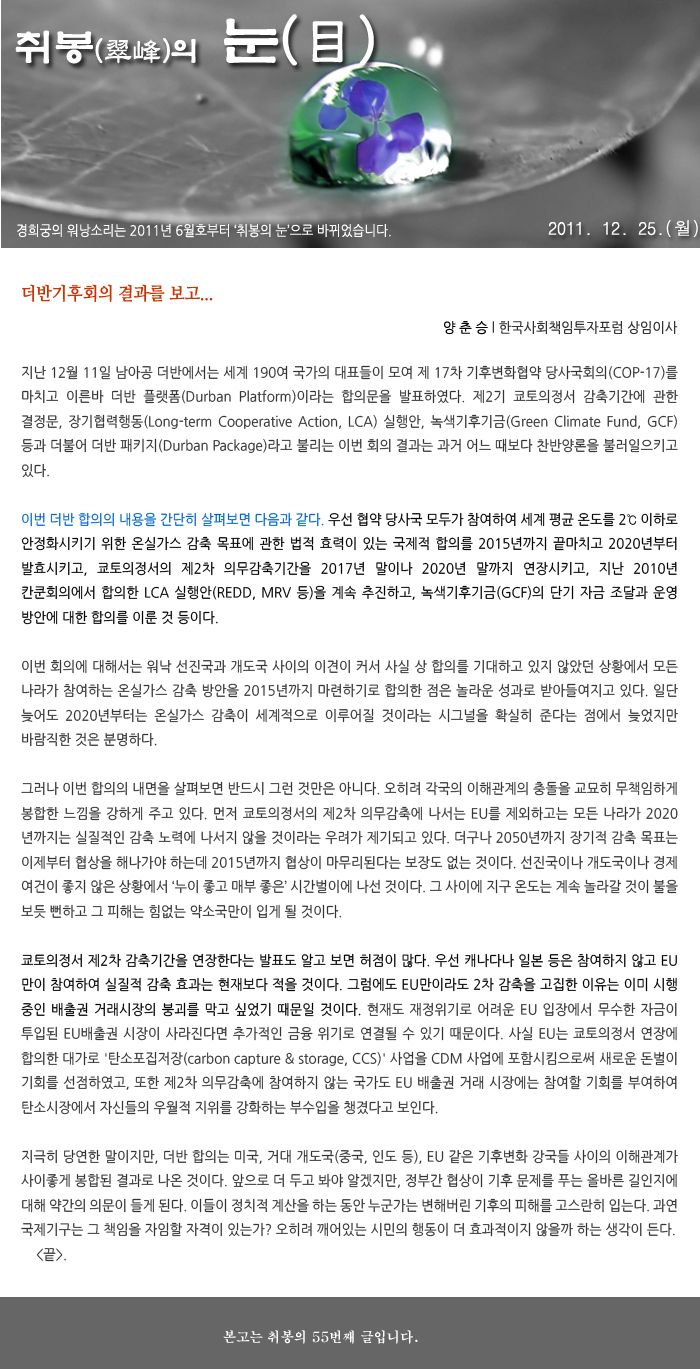
<style>
.page{position:relative;width:700px;height:1369px;background:#ffffff}
.page>*{position:absolute;margin:0}
.t1{font:28.6px "YetR-HM";color:#ffffff}
.t2{font:39.6px "YetR-HM";color:#ffffff}
.t3{font:57.3px "YetR-HM";color:#ffffff}
.t4{font:18px "DotumChe";color:#ffffff}
.t5{font:14px "NanumGothic";color:#ffffff;scale:0.9 1}
.t6{font:18px "NanumMyeongjoBold";color:#cc3300;scale:0.9 1}
.t7{font:14px "NanumGothic";color:#333333;scale:0.95 1}
.t8{font:14px "NanumGothic";color:#000000;scale:0.95 1}
.t9{font:14px "NanumGothic";color:#0066cc;scale:0.95 1}
.t10{font:14px "H2mjrE";color:#ffffff;scale:0.95 1}
</style>
<div class="page">
<p class="t1" style="left:15px;top:14px;width:359px;height:52px"><span class="t2">취봉</span>(翠峰)의  <span class="t3">눈(目)</span></p>
<p class="t4" style="left:548px;top:220px;width:150px;height:17px">2011. 12. 25.(월)</p>
<p class="t5" style="left:17px;top:224px;width:374px;height:14px">경희궁의 워낭소리는 2011년 6월호부터 ‘취봉의 눈’으로 바뀌었습니다.</p>
<p class="t6" style="left:22px;top:284px;width:191px;height:18px">더반기후회의 결과를 보고...</p>
<p class="t7" style="left:444px;top:321px;width:234px;height:14px"><span class="t8">양 춘 승 </span>l 한국사회책임투자포럼 상임이사</p>
<p class="t7" style="left:21px;top:365px;width:657px;height:897px;text-align:justify">지난 12월 11일 남아공 더반에서는 세계 190여 국가의 대표들이 모여 제 17차 기후변화협약 당사국회의(COP-17)를 마치고 이른바 더반 플랫폼(Durban Platform)이라는 합의문을 발표하였다. 제2기 쿄토의정서 감축기간에 관한 결정문, 장기협력행동(Long-term Cooperative Action, LCA) 실행안, 녹색기후기금(Green Climate Fund, GCF) 등과 더불어 더반 패키지(Durban Package)라고 불리는 이번 회의 결과는 과거 어느 때보다 찬반양론을 불러일으키고 있다. <br><br><span class="t9">이번 더반 합의의 내용을 간단히 살펴보면 다음과 같다. </span><span class="t8">우선 협약 당사국 모두가 참여하여 세계 평균 온도를 2℃ 이하로 안정화시키기 위한 온실가스 감축 목표에 관한 법적 효력이 있는 국제적 합의를 2015년까지 끝마치고 2020년부터 발효시키고, 쿄토의정서의 제2차 의무감축기간을 2017년 말이나 2020년 말까지 연장시키고, 지난 2010년 칸쿤회의에서 합의한 LCA 실행안(REDD, MRV 등)을 계속 추진하고, 녹색기후기금(GCF)의 단기 자금 조달과 운영 방안에 대한 합의를 이룬 것 등이다.<br></span><br>이번 회의에 대해서는 워낙 선진국과 개도국 사이의 이견이 커서 사실 상 합의를 기대하고 있지 않았던 상황에서 모든 나라가 참여하는 온실가스 감축 방안을 2015년까지 마련하기로 합의한 점은 놀라운 성과로 받아들여지고 있다. 일단 늦어도 2020년부터는 온실가스 감축이 세계적으로 이루어질 것이라는 시그널을 확실히 준다는 점에서 늦었지만 바람직한 것은 분명하다.<br><br>그러나 이번 합의의 내면을 살펴보면 반드시 그런 것만은 아니다. 오히려 각국의 이해관계의 충돌을 교묘히 무책임하게 봉합한 느낌을 강하게 주고 있다. 먼저 쿄토의정서의 제2차 의무감축에 나서는 EU를 제외하고는 모든 나라가 2020년까지는 실질적인 감축 노력에 나서지 않을 것이라는 우려가 제기되고 있다. 더구나 2050년까지 장기적 감축 목표는 이제부터 협상을 해나가야 하는데 2015년까지 협상이 마무리된다는 보장도 없는 것이다. 선진국이나 개도국이나 경제 여건이 좋지 않은 상황에서 ‘누이 좋고 매부 좋은’ 시간벌이에 나선 것이다. 그 사이에 지구 온도는 계속 놀라갈 것이 불을 보듯 뻔하고 그 피해는 힘없는 약소국만이 입게 될 것이다.<br><br><span class="t8">쿄토의정서 제2차 감축기간을 연장한다는 발표도 알고 보면 허점이 많다. 우선 캐나다나 일본 등은 참여하지 않고 EU만이 참여하여 실질적 감축 효과는 현재보다 적을 것이다. 그럼에도 EU만이라도 2차 감축을 고집한 이유는 이미 시행 중인 배출권 거래시장의 붕괴를 막고 싶었기 때문일 것이다.</span> 현재도 재정위기로 어려운 EU 입장에서 무수한 자금이 투입된 EU배출권 시장이 사라진다면 추가적인 금융 위기로 연결될 수 있기 때문이다. 사실 EU는 쿄토의정서 연장에 합의한 대가로 '탄소포집저장(carbon capture &amp; storage, CCS)' 사업을 CDM 사업에 포함시킴으로써 새로운 돈벌이 기회를 선점하였고, 또한 제2차 의무감축에 참여하지 않는 국가도 EU 배출권 거래 시장에는 참여할 기회를 부여하여 탄소시장에서 자신들의 우월적 지위를 강화하는 부수입을 챙겼다고 보인다.<br><br>지극히 당연한 말이지만, 더반 합의는 미국, 거대 개도국(중국, 인도 등), EU 같은 기후변화 강국들 사이의 이해관계가 사이좋게 봉합된 결과로 나온 것이다. 앞으로 더 두고 봐야 알겠지만, 정부간 협상이 기후 문제를 푸는 올바른 길인지에 대해 약간의 의문이 들게 된다. 이들이 정치적 계산을 하는 동안 누군가는 변해버린 기후의 피해를 고스란히 입는다. 과연 국제기구는 그 책임을 자임할 자격이 있는가? 오히려 깨어있는 시민의 행동이 더 효과적이지 않을까 하는 생각이 든다.<br>    &lt;끝&gt;.</p>
<p class="t10" style="left:223px;top:1330px;width:195px;height:14px">본고는 취봉의 55번째 글입니다.</p>
</div>
